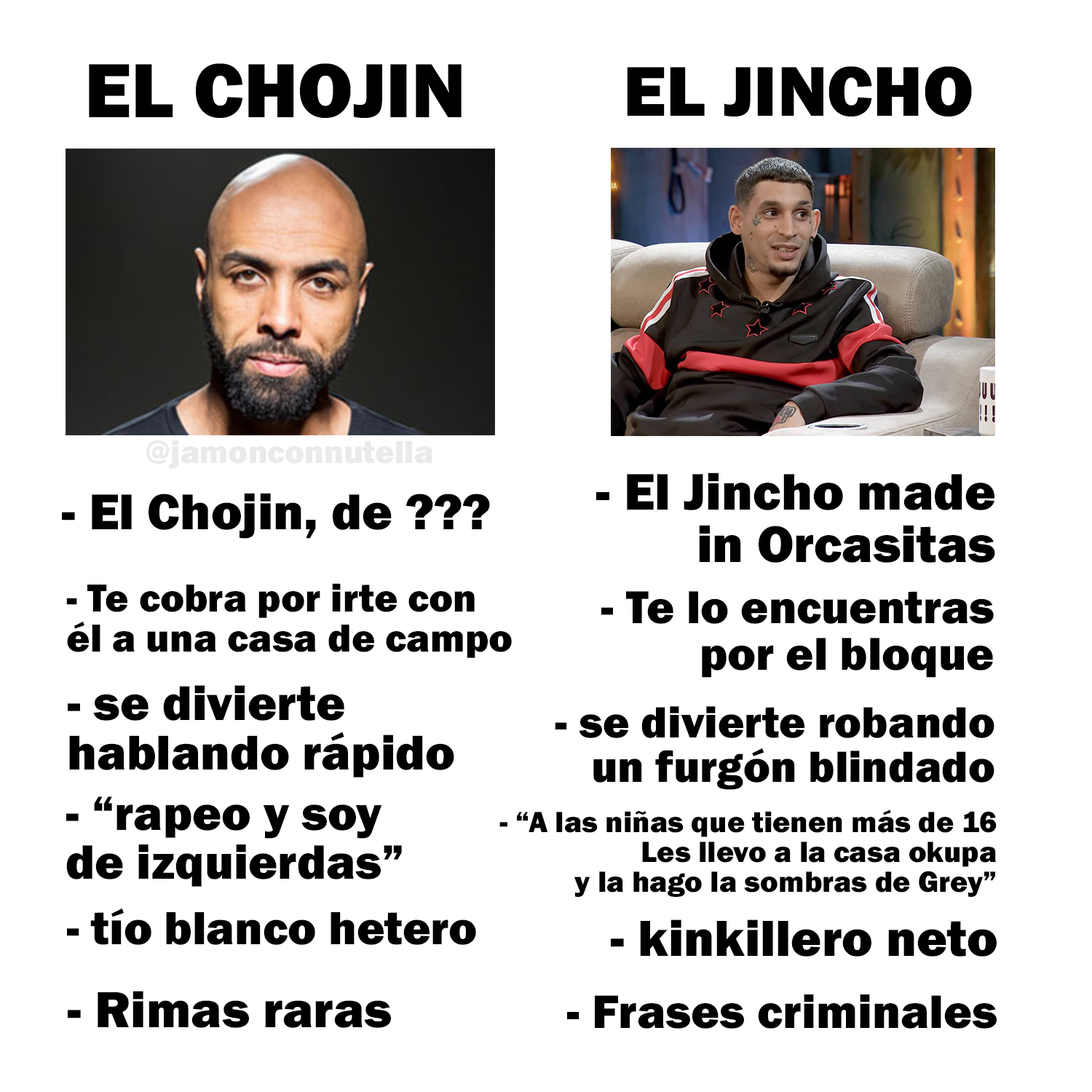
<style>
.page{position:relative;width:1092px;height:1092px;background:#ffffff}
.page>*{position:absolute;margin:0}
.t1{font:79.5px "FranklinGothic-Heavy";color:#000000}
.t2{font:72.9px "FranklinGothic-Heavy";color:#000000}
.t3{font:33.2px "FranklinGothic-Heavy";color:#eaeaea}
.t4{font:53.1px "FranklinGothic-Heavy";color:#000000}
.t5{font:52.2px "FranklinGothic-Heavy";color:#000000}
.t6{font:40.5px "FranklinGothic-Heavy";color:#000000}
.t7{font:47.6px "FranklinGothic-Heavy";color:#000000}
.t8{font:50.4px "FranklinGothic-Heavy";color:#000000}
.t9{font:45.4px "FranklinGothic-Heavy";color:#000000}
.t10{font:49.8px "FranklinGothic-Heavy";color:#000000}
.t11{font:30.3px "FranklinGothic-Heavy";color:#000000}
.t12{font:48px "FranklinGothic-Heavy";color:#000000}
.t13{font:52.4px "FranklinGothic-Heavy";color:#000000}
.t14{font:48.6px "FranklinGothic-Heavy";color:#000000}
</style>
<div class="page">
<p class="t1" style="left:89px;top:63px;width:373px;height:55px">EL CHOJIN</p>
<p class="t2" style="left:627px;top:66px;width:345px;height:50px">EL JINCHO</p>
<p class="t3" style="left:146px;top:440px;width:287px;height:29px">@jamonconnutella</p>
<p class="t4" style="left:596px;top:472px;width:399px;height:91px;text-align:right">- El Jincho made<br>in Orcasitas</p>
<p class="t5" style="left:62px;top:493px;width:428px;height:46px">- El Chojin, de ???</p>
<p class="t6" style="left:66px;top:583px;width:446px;height:75px">- Te cobra por irte con<br>él a una casa de campo</p>
<p class="t7" style="left:601px;top:591px;width:393px;height:87px;text-align:right">- Te lo encuentras<br>por el bloque</p>
<p class="t8" style="left:68px;top:685px;width:386px;height:92px">- se divierte<br>hablando rápido</p>
<p class="t9" style="left:555px;top:706px;width:439px;height:84px;text-align:right">- se divierte robando<br>un furgón blindado</p>
<p class="t10" style="left:66px;top:796px;width:336px;height:91px">- “rapeo y soy<br>de izquierdas”</p>
<p class="t11" style="left:499px;top:810px;width:498px;height:87px;text-align:right">- “A las niñas que tienen más de 16<br>Les llevo a la casa okupa<br>y la hago la sombras de Grey”</p>
<p class="t12" style="left:67px;top:908px;width:409px;height:37px">- tío blanco hetero</p>
<p class="t13" style="left:611px;top:919px;width:386px;height:38px">- kinkillero neto</p>
<p class="t13" style="left:68px;top:991px;width:323px;height:37px">- Rimas raras</p>
<p class="t14" style="left:567px;top:994px;width:430px;height:35px">- Frases criminales</p>
</div>
